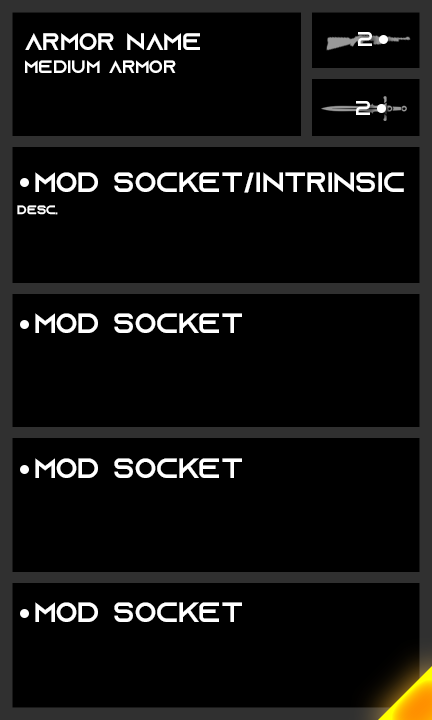
<style>
.page{position:relative;width:432px;height:720px;background:#000000}
.page>*{position:absolute;margin:0}
.t1{font:24px "AzonixRegular";color:#ffffff}
.t2{font:20px "AzonixRegular";color:#ffffff}
.t3{font:18px "AzonixRegular";color:#ffffff}
.t4{font:28px "AzonixRegular";color:#ffffff}
.t5{font:12px "AzonixRegular";color:#ffffff}
</style>
<div class="page">
<p class="t1" style="left:25px;top:33px;width:175px;height:17px">armor name</p>
<p class="t2" style="left:358px;top:32px;width:14px;height:14px">2</p>
<p class="t3" style="left:25px;top:60px;width:151px;height:13px">medium armor</p>
<p class="t2" style="left:356px;top:101px;width:14px;height:14px">2</p>
<p class="t4" style="left:35px;top:172px;width:369px;height:21px">mod socket/intrinsic</p>
<p class="t5" style="left:17px;top:205px;width:41px;height:10px">desc.</p>
<p class="t4" style="left:35px;top:313px;width:207px;height:20px">mod socket</p>
<p class="t4" style="left:35px;top:458px;width:207px;height:20px">mod socket</p>
<p class="t4" style="left:35px;top:602px;width:207px;height:20px">mod socket</p>
</div>
